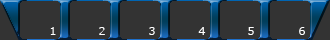
<style>
.page{position:relative;width:330px;height:40px;background:#333333}
.page>*{position:absolute;margin:0}
.t1{font:11px "Verdana";color:#ffffff}
</style>
<div class="page">
<p class="t1" style="left:50px;top:27px;width:6px;height:8px">1</p>
<p class="t1" style="left:99px;top:27px;width:6px;height:8px">2</p>
<p class="t1" style="left:149px;top:27px;width:6px;height:8px">3</p>
<p class="t1" style="left:198px;top:27px;width:8px;height:8px">4</p>
<p class="t1" style="left:248px;top:27px;width:6px;height:8px">5</p>
<p class="t1" style="left:299px;top:27px;width:6px;height:8px">6</p>
</div>
